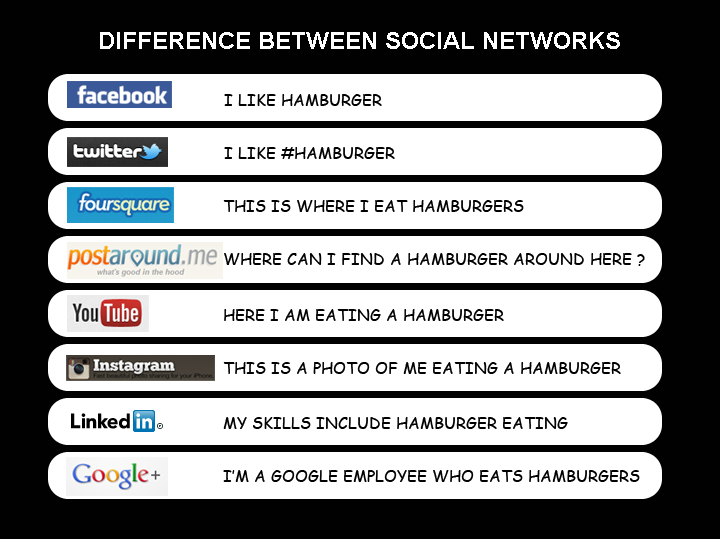
<style>
.page{position:relative;width:720px;height:539px;background:#ffffff}
.page>*{position:absolute;margin:0}
.t1{font:24px "Arial-BoldMT";color:#ffffff}
.t2{font:16px "ComicSansMS";color:#000000}
</style>
<div class="page">
<p class="t1" style="left:100px;top:32px;width:520px;height:17px">DIFFERENCE BETWEEN SOCIAL NETWORKS</p>
<p class="t2" style="left:224px;top:94px;width:158px;height:12px">I LIKE HAMBURGER</p>
<p class="t2" style="left:224px;top:147px;width:171px;height:12px">I LIKE #HAMBURGER</p>
<p class="t2" style="left:223px;top:200px;width:301px;height:12px">THIS IS WHERE I EAT HAMBURGERS</p>
<p class="t2" style="left:224px;top:253px;width:421px;height:13px">WHERE CAN I FIND A HAMBURGER AROUND HERE ?</p>
<p class="t2" style="left:224px;top:309px;width:280px;height:12px">HERE I AM EATING A HAMBURGER</p>
<p class="t2" style="left:223px;top:362px;width:398px;height:12px">THIS IS A PHOTO OF ME EATING A HAMBURGER</p>
<p class="t2" style="left:223px;top:417px;width:345px;height:12px">MY SKILLS INCLUDE HAMBURGER EATING</p>
<p class="t2" style="left:223px;top:470px;width:417px;height:12px">I’M A GOOGLE EMPLOYEE WHO EATS HAMBURGERS</p>
</div>
